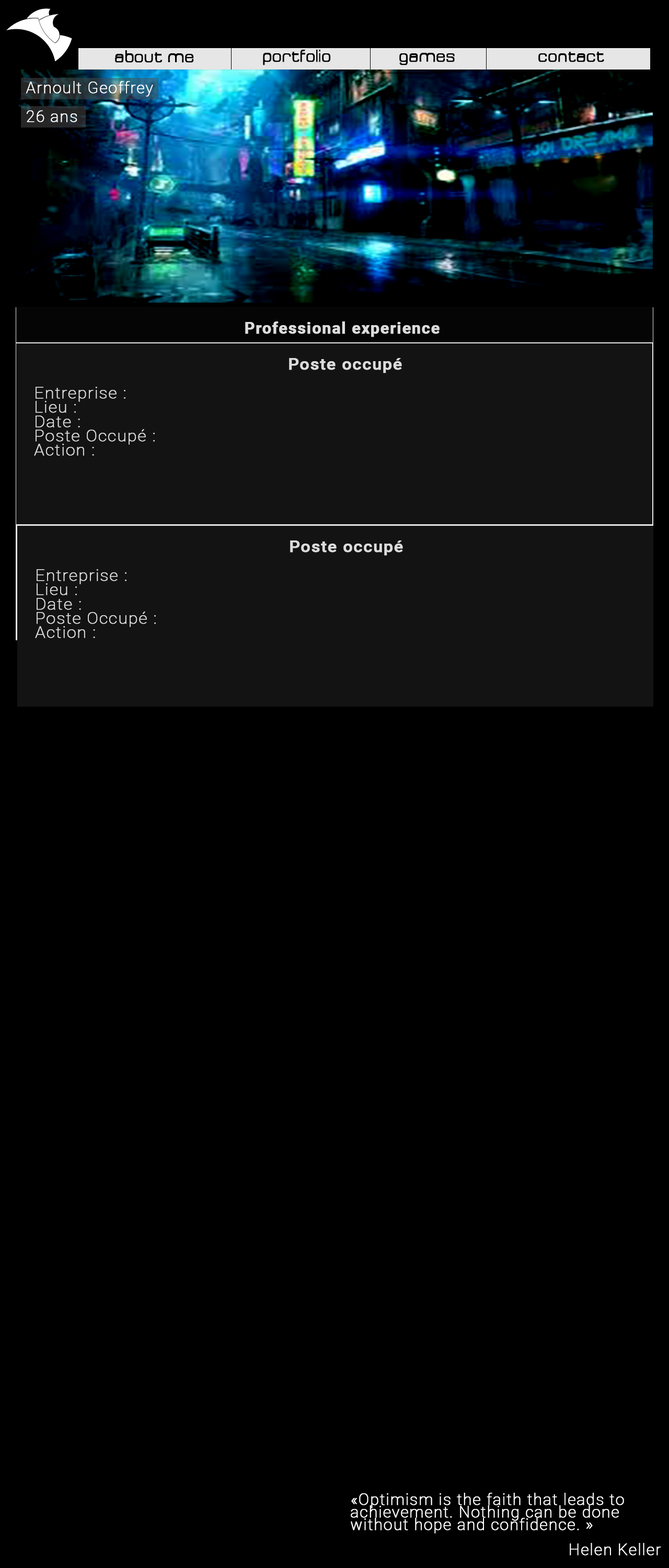
<style>
.page{position:relative;width:669px;height:1568px;background:#000000}
.page>*{position:absolute;margin:0}
.t1{font:15.7px "Acens";letter-spacing:0.045em;color:#000000;font-weight:bold}
.t2{font:15.7px/28.7px "Roboto-Thin";letter-spacing:0.045em;color:#ffffff;font-weight:bold}
.t3{font:15.7px "Roboto-Bold";letter-spacing:0.045em;color:#dddddd;font-weight:bold}
.t4{font:15.7px "Roboto-Thin";letter-spacing:0.045em;color:#000000;font-weight:bold}
.t5{font:15.9px/14.3px "Roboto-Thin";letter-spacing:0.045em;color:#dcdcdc;font-weight:bold;scale:1.04 1}
.t6{font:15.9px/14.3px "Roboto-Medium";letter-spacing:0.045em;color:#000000;font-weight:bold;scale:1.04 1}
.t7{font:15.9px/14.3px "Roboto-Medium";letter-spacing:0.045em;color:#dcdcdc;font-weight:bold;scale:1.04 1}
.t8{font:15.7px/12.5px "Roboto-Thin";letter-spacing:0.045em;color:#ffffff;font-weight:bold}
</style>
<div class="page">
<p class="t1" style="left:115px;top:50px;width:79px;height:13px">about me</p>
<p class="t1" style="left:263px;top:50px;width:68px;height:15px">portfolio</p>
<p class="t1" style="left:399px;top:53px;width:56px;height:12px">games</p>
<p class="t1" style="left:538px;top:52px;width:66px;height:10px">contact</p>
<p class="t2" style="left:26px;top:81px;width:127px;height:41px">Arnoult Geoffrey<br>26 ans</p>
<p class="t3" style="left:245px;top:321px;width:195px;height:16px"><span class="t4"><br>   </span>Professional experience</p>
<p class="t5" style="left:34px;top:358px;width:368px;height:98px;text-align:center"><span class="t6"> </span><span class="t7"> Poste occupé<br><br>  </span>Entreprise :<br>     Lieu :<br>  Date :<br>  Poste Occupé :<br>  Action :</p>
<p class="t5" style="left:35px;top:540px;width:368px;height:98px;text-align:center"><span class="t6"> </span><span class="t7"> Poste occupé<br><br>  </span>Entreprise :<br>     Lieu :<br>  Date :<br>  Poste Occupé :<br>  Action :</p>
<p class="t8" style="left:351px;top:1493px;width:310px;height:62px">«Optimism is the faith that leads to achievement. Nothing can be done without hope and confidence. »<br><br>Helen Keller</p>
</div>
